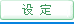
<style>
.page{position:relative;width:74px;height:24px;background:#ffffff}
.page>*{position:absolute;margin:0}
.t1{font:12px "SimSun";color:#42985e}
</style>
<div class="page">
<p class="t1" style="left:22px;top:4px;width:29px;height:11px">设 定</p>
</div>
